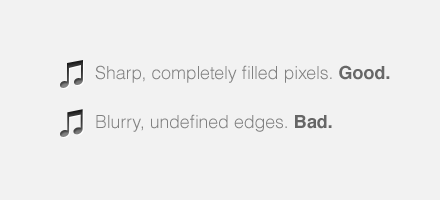
<style>
.page{position:relative;width:440px;height:200px;background:#f2f2f2}
.page>*{position:absolute;margin:0}
.t1{font:18px "Helvetica-Light";color:#808080}
.t2{font:18px "Helvetica-Bold";color:#676767}
.t3{font:18px "Helvetica-Bold";color:#666666}
</style>
<div class="page">
<p class="t1" style="left:95px;top:65px;width:295px;height:18px">Sharp, completely filled pixels. <span class="t2">Good.</span></p>
<p class="t1" style="left:96px;top:114px;width:236px;height:18px">Blurry, undefined edges. <span class="t3">Bad.</span></p>
</div>
